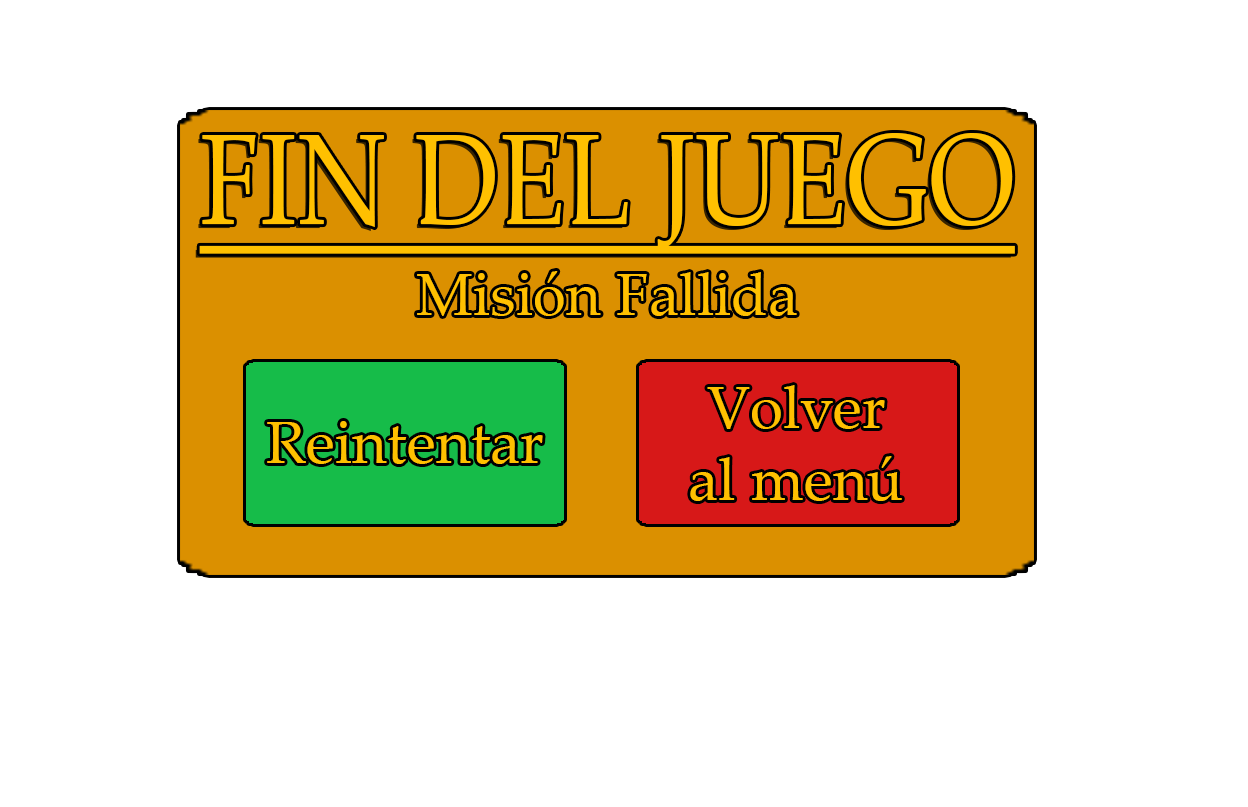
<style>
.page{position:relative;width:1248px;height:807px;background:#ffffff}
.page>*{position:absolute;margin:0}
.t1{font:128.8px "PalatinoLinotype-Roman";color:#ffc000;text-decoration:underline;scale:0.84 1}
.t2{font:60px "PalatinoLinotype-Roman";color:#ffc000}
</style>
<div class="page">
<p class="t1" style="left:199px;top:133px;width:816px;height:121px">FIN DEL JUEGO</p>
<p class="t2" style="left:417px;top:271px;width:380px;height:45px">Misión Fallida</p>
</div>
